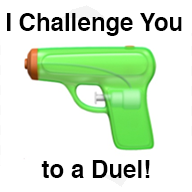
<style>
.page{position:relative;width:192px;height:192px;background:#ffffff}
.page>*{position:absolute;margin:0}
.t1{font:24px "Helvetica-Bold";color:#000000}
</style>
<div class="page">
<p class="t1" style="left:7px;top:13px;width:175px;height:23px">I Challenge You</p>
<p class="t1" style="left:41px;top:160px;width:109px;height:18px">to a Duel!</p>
</div>
